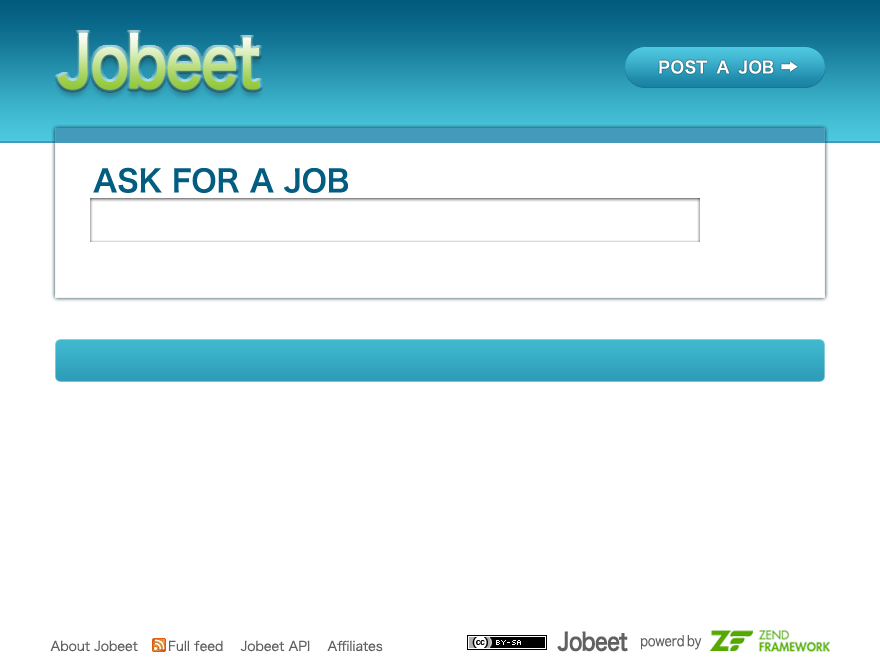
<style>
.page{position:relative;width:880px;height:660px;background:#ffffff}
.page>*{position:absolute;margin:0}
.t1{font:69.6px "HiraKakuPro-W6";scale:0.83 1}
.t2{font:16px "HiraKakuPro-W6";color:#ffffff}
.t3{font:30px "HiraKakuPro-W6";color:#025d80}
.t4{font:13px "HiraKakuPro-W3";color:#606060}
.t5{font:24px "HiraKakuPro-W6";color:#616161;scale:0.83 1}
.t6{font:14.4px "HiraKakuPro-W3";color:#616161;scale:0.83 1}
</style>
<div class="page">
<p class="t1" style="left:57px;top:32px;width:203px;height:58px">Jobeet</p>
<p class="t2" style="left:659px;top:60px;width:115px;height:14px">POST  A  JOB</p>
<p class="t3" style="left:93px;top:167px;width:255px;height:26px">ASK FOR A JOB</p>
<p class="t4" style="left:50px;top:640px;width:333px;height:12px">About Jobeet　 　Full feed　 Jobeet API　 Affiliates</p>
<p class="t5" style="left:557px;top:631px;width:71px;height:21px">Jobeet</p>
<p class="t6" style="left:640px;top:635px;width:62px;height:15px">powerd by</p>
</div>
